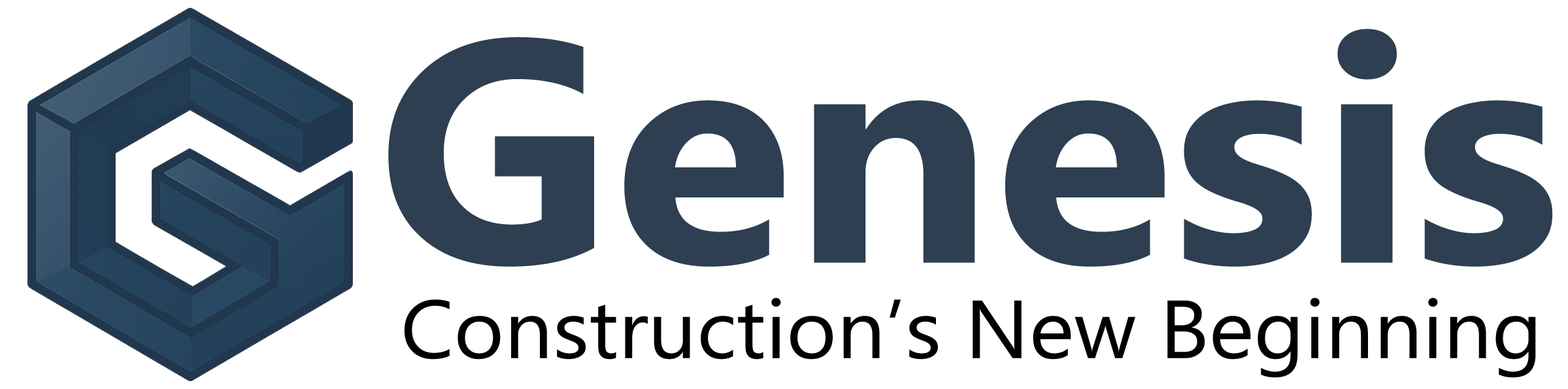
<style>
.page{position:relative;width:1568px;height:389px;background:#ffffff}
.page>*{position:absolute;margin:0}
.t1{font:316.5px "SegoeUI-Bold";color:#2d3f51;scale:1.05 1}
.t2{font:81.8px "SegoeUI";color:#000000;scale:1.05 1}
</style>
<div class="page">
<p class="t1" style="left:388px;top:29px;width:1165px;height:238px">Genesis</p>
<p class="t2" style="left:404px;top:297px;width:1132px;height:81px">Construction’s New Beginning</p>
</div>
